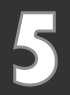
<style>
.page{position:relative;width:70px;height:95px;background:#333333}
.page>*{position:absolute;margin:0}
.t1{font:110px "Bauhaus93";letter-spacing:0.2em;color:#ffffff}
</style>
<div class="page">
<p class="t1" style="left:13px;top:11px;width:45px;height:76px">5</p>
</div>
